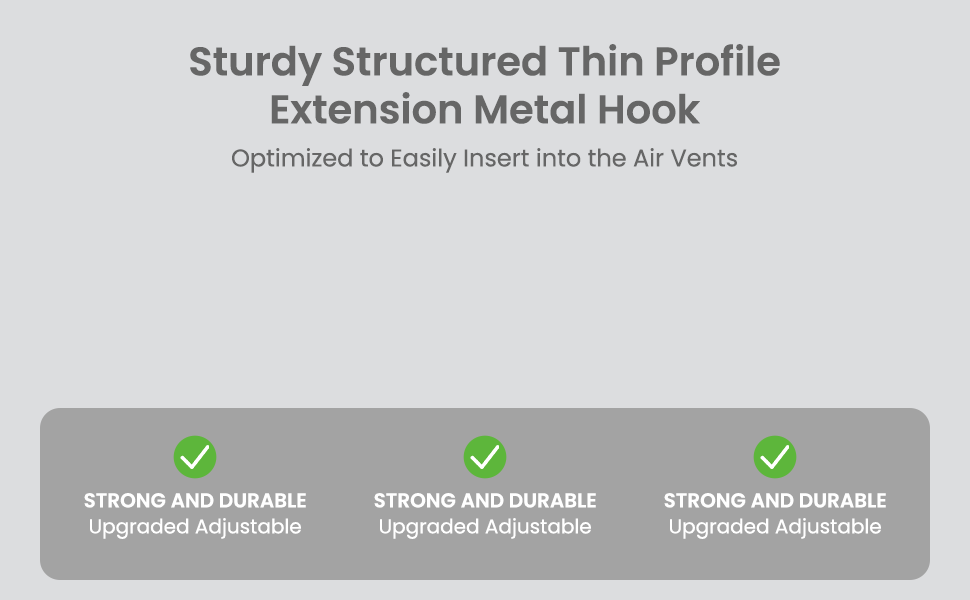
<style>
.page{position:relative;width:970px;height:600px;background:#dcdddf}
.page>*{position:absolute;margin:0}
.t1{font:40px "Poppins-SemiBold";color:#666666}
.t2{font:24px "Poppins-Regular";color:#666666}
.t3{font:20px "Poppins-SemiBold";color:#ffffff;text-transform:uppercase}
.t4{font:20px "Poppins-Regular";color:#ffffff}
</style>
<div class="page">
<p class="t1" style="left:190px;top:44px;width:590px;height:80px;text-align:center">Sturdy Structured Thin Profile<br>Extension Metal Hook</p>
<p class="t2" style="left:232px;top:148px;width:505px;height:25px">Optimized to Easily Insert into the Air Vents</p>
<p class="t3" style="left:84px;top:493px;width:222px;height:15px">Strong and Durable</p>
<p class="t3" style="left:374px;top:493px;width:222px;height:15px">Strong and Durable</p>
<p class="t3" style="left:664px;top:493px;width:222px;height:15px">Strong and Durable</p>
<p class="t4" style="left:90px;top:518px;width:211px;height:21px">Upgraded Adjustable</p>
<p class="t4" style="left:380px;top:518px;width:211px;height:21px">Upgraded Adjustable</p>
<p class="t4" style="left:670px;top:518px;width:211px;height:21px">Upgraded Adjustable</p>
</div>
